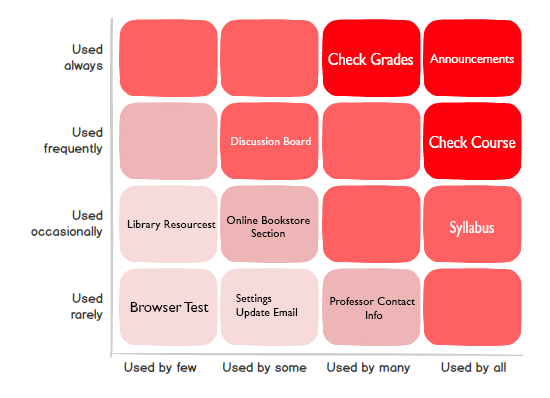
<style>
.page{position:relative;width:550px;height:398px;background:#ffffff}
.page>*{position:absolute;margin:0}
.t1{font:18px "GillSans";color:#ffffff;scale:0.82 1}
.t2{font:12.7px "GillSans";color:#ffffff}
.t3{font:11.5px "GillSans";color:#ffffff}
.t4{font:11.5px "GillSans";color:#000000}
.t5{font:18px "GillSans";color:#ffffff;scale:0.79 1}
.t6{font:15px "GillSans";color:#000000}
</style>
<div class="page">
<p class="t1" style="left:328px;top:53px;width:85px;height:12px">Check Grades</p>
<p class="t2" style="left:430px;top:54px;width:84px;height:9px">Announcements</p>
<p class="t3" style="left:231px;top:137px;width:80px;height:8px">Discussion Board</p>
<p class="t1" style="left:429px;top:136px;width:87px;height:12px">Check Course</p>
<p class="t4" style="left:127px;top:220px;width:89px;height:11px">Library Resourcest</p>
<p class="t4" style="left:226px;top:216px;width:84px;height:21px;text-align:center">Online Bookstore<br>Section</p>
<p class="t5" style="left:450px;top:221px;width:44px;height:16px">Syllabus</p>
<p class="t4" style="left:236px;top:294px;width:62px;height:25px">Settings<br>Update Email</p>
<p class="t6" style="left:130px;top:302px;width:79px;height:10px">Browser Test</p>
<p class="t4" style="left:330px;top:297px;width:85px;height:22px;text-align:center">Professor Contact <br>Info</p>
</div>
